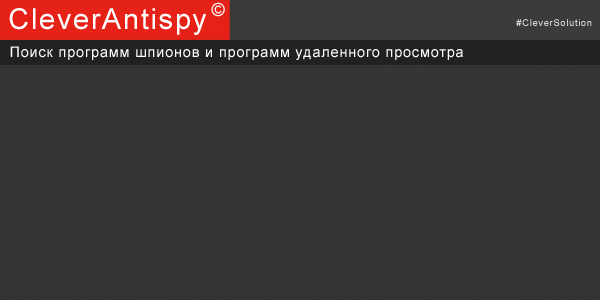
<style>
.page{position:relative;width:600px;height:300px;background:#3b3b3b}
.page>*{position:absolute;margin:0}
.t1{font:18px "ArialMT";letter-spacing:0.06em;color:#ffffff}
.t2{font:28.8px "ArialMT";letter-spacing:0.06em;color:#ffffff}
.t3{font:9.6px "ArialMT";letter-spacing:0.06em}
.t4{font:14.4px "ArialMT";letter-spacing:0.06em;color:#ffffff}
</style>
<div class="page">
<p class="t1" style="left:211px;top:2px;width:14px;height:15px">©</p>
<p class="t2" style="left:9px;top:8px;width:197px;height:27px">CleverAntispy</p>
<p class="t3" style="left:516px;top:19px;width:76px;height:7px">#CleverSolution</p>
<p class="t4" style="left:10px;top:46px;width:453px;height:14px">Поиск программ шпионов и программ удаленного просмотра</p>
</div>
